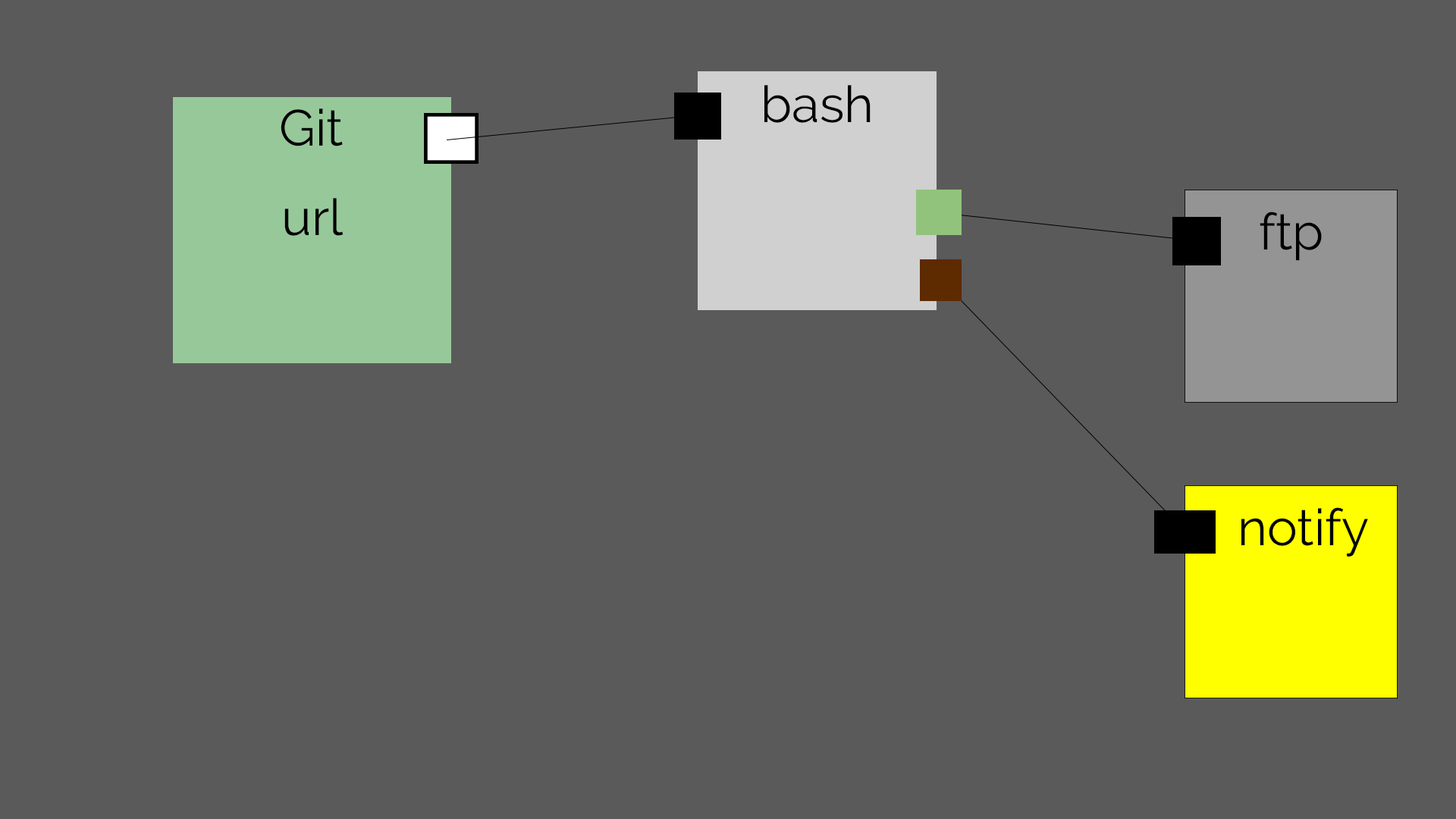
<style>
.page{position:relative;width:1456px;height:819px;background:#5a5a5a}
.page>*{position:absolute;margin:0}
.t1{font:50.6px "Raleway-Regular";color:#000000}
</style>
<div class="page">
<p class="t1" style="left:764px;top:85px;width:107px;height:38px">bash</p>
<p class="t1" style="left:281px;top:108px;width:62px;height:38px">Git</p>
<p class="t1" style="left:284px;top:198px;width:60px;height:38px">url</p>
<p class="t1" style="left:1260px;top:212px;width:62px;height:49px">ftp</p>
<p class="t1" style="left:1241px;top:507px;width:127px;height:50px">notify</p>
</div>
